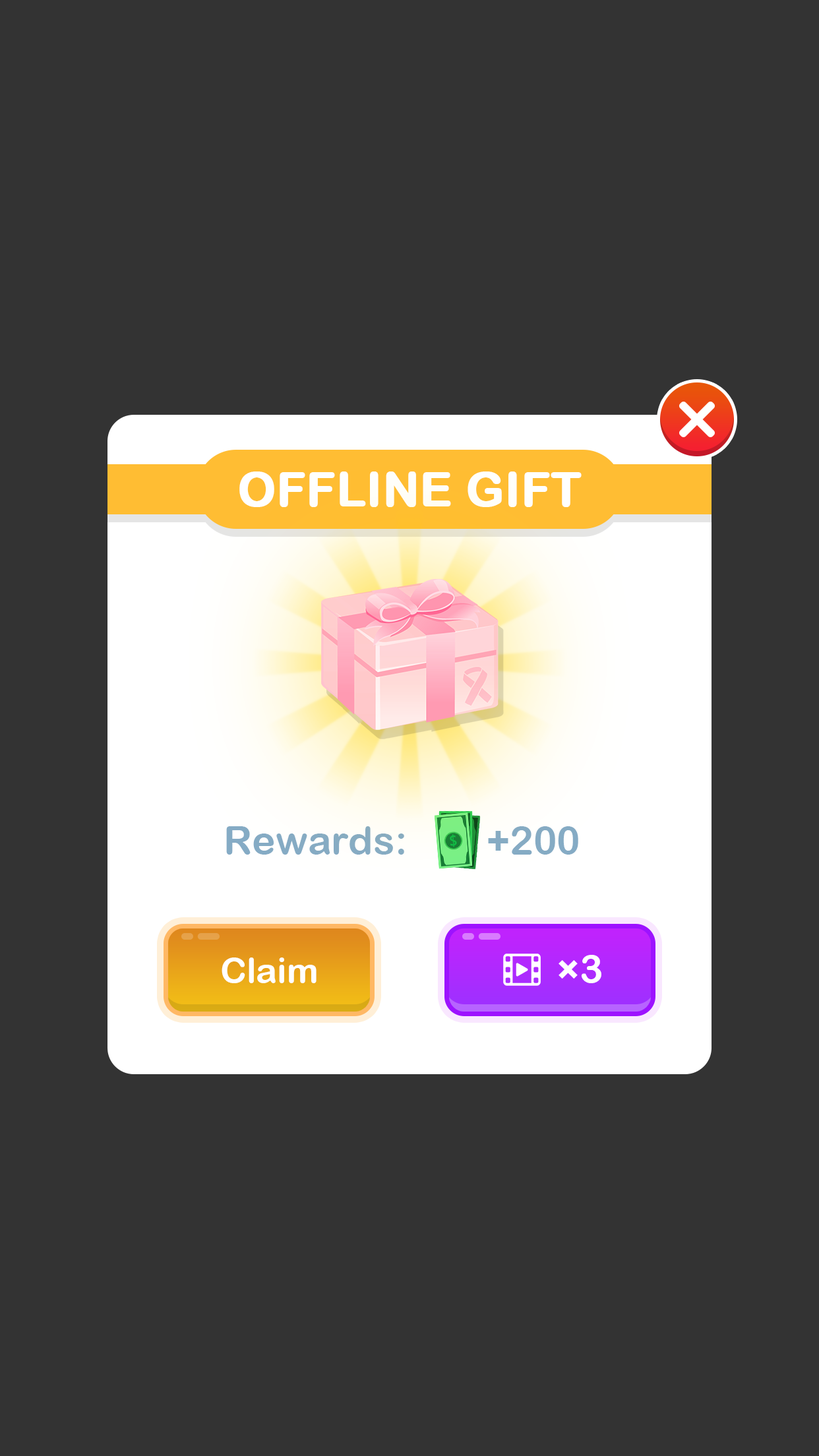
<style>
.page{position:relative;width:819px;height:1456px;background:#333333}
.page>*{position:absolute;margin:0}
.t1{font:47.5px "ArialRoundedMTBold";color:#ffffff;font-weight:bold}
.t2{font:39.6px "ArialRoundedMTBold";color:#85abc5}
.t3{font:35.6px "ArialRoundedMTBold";color:#ffffff}
.t4{font:39.6px "ArialRoundedMTBold";color:#ffffff}
</style>
<div class="page">
<p class="t1" style="left:239px;top:471px;width:343px;height:36px">OFFLINE GIFT</p>
<p class="t2" style="left:226px;top:826px;width:178px;height:29px">Rewards:</p>
<p class="t2" style="left:488px;top:826px;width:90px;height:29px">+200</p>
<p class="t3" style="left:222px;top:957px;width:95px;height:26px">Claim</p>
<p class="t4" style="left:559px;top:955px;width:42px;height:28px">×3</p>
</div>
